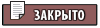
<style>
.page{position:relative;width:100px;height:28px;background:#ffffff}
.page>*{position:absolute;margin:0}
.t1{font:14px "MyriadPro-BoldCond";letter-spacing:0.05em;color:#ffffff}
</style>
<div class="page">
<p class="t1" style="left:34px;top:10px;width:51px;height:10px">ЗАКРЫТО</p>
</div>
